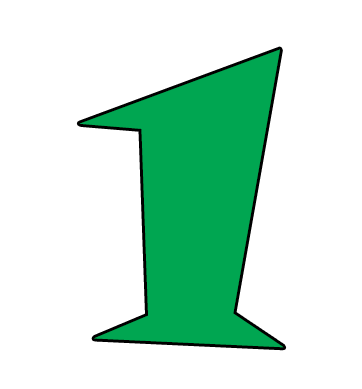
<style>
.page{position:relative;width:362px;height:389px;background:#ffffff}
.page>*{position:absolute;margin:0}
.t1{font:400px "SnapITC-Regular";color:#00a651}
</style>
<div class="page">
<p class="t1" style="left:79px;top:49px;width:205px;height:299px">1</p>
</div>
